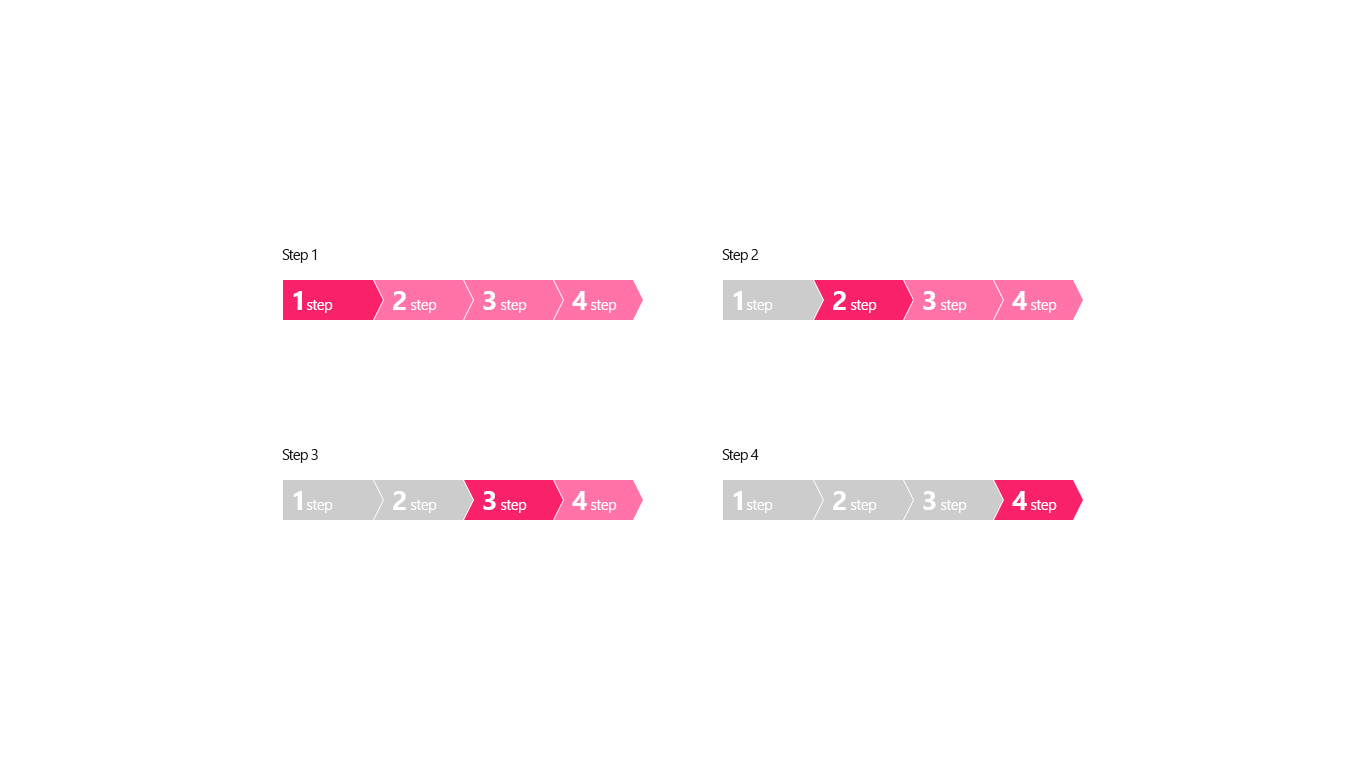
<style>
.page{position:relative;width:1366px;height:768px;background:#ffffff}
.page>*{position:absolute;margin:0}
.t1{font:14.7px "SegoeUI";letter-spacing:-0.05em;color:#191919}
.t2{font:26.7px "SegoeUI-Bold";letter-spacing:-0.025em;color:#ffffff}
.t3{font:14.7px "SegoeUI";letter-spacing:-0.025em;color:#ffffff}
</style>
<div class="page">
<p class="t1" style="left:282px;top:249px;width:35px;height:14px">Step 1</p>
<p class="t1" style="left:722px;top:249px;width:37px;height:14px">Step 2</p>
<p class="t2" style="left:293px;top:291px;width:9px;height:19px">1</p>
<p class="t2" style="left:393px;top:291px;width:13px;height:19px">2</p>
<p class="t2" style="left:483px;top:291px;width:13px;height:19px">3</p>
<p class="t2" style="left:572px;top:291px;width:15px;height:19px">4</p>
<p class="t2" style="left:733px;top:291px;width:9px;height:19px">1</p>
<p class="t2" style="left:833px;top:291px;width:13px;height:19px">2</p>
<p class="t2" style="left:923px;top:291px;width:13px;height:19px">3</p>
<p class="t2" style="left:1012px;top:291px;width:15px;height:19px">4</p>
<p class="t3" style="left:307px;top:300px;width:26px;height:13px">step</p>
<p class="t3" style="left:411px;top:300px;width:26px;height:13px">step</p>
<p class="t3" style="left:501px;top:300px;width:26px;height:13px">step</p>
<p class="t3" style="left:591px;top:300px;width:26px;height:13px">step</p>
<p class="t3" style="left:747px;top:300px;width:26px;height:13px">step</p>
<p class="t3" style="left:851px;top:300px;width:26px;height:13px">step</p>
<p class="t3" style="left:941px;top:300px;width:26px;height:13px">step</p>
<p class="t3" style="left:1031px;top:300px;width:26px;height:13px">step</p>
<p class="t1" style="left:282px;top:449px;width:36px;height:14px">Step 3</p>
<p class="t1" style="left:722px;top:449px;width:37px;height:14px">Step 4</p>
<p class="t2" style="left:293px;top:491px;width:9px;height:19px">1</p>
<p class="t2" style="left:393px;top:491px;width:13px;height:19px">2</p>
<p class="t2" style="left:483px;top:491px;width:13px;height:19px">3</p>
<p class="t2" style="left:572px;top:491px;width:15px;height:19px">4</p>
<p class="t2" style="left:733px;top:491px;width:9px;height:19px">1</p>
<p class="t2" style="left:833px;top:491px;width:13px;height:19px">2</p>
<p class="t2" style="left:923px;top:491px;width:13px;height:19px">3</p>
<p class="t2" style="left:1012px;top:491px;width:15px;height:19px">4</p>
<p class="t3" style="left:307px;top:500px;width:26px;height:13px">step</p>
<p class="t3" style="left:411px;top:500px;width:26px;height:13px">step</p>
<p class="t3" style="left:501px;top:500px;width:26px;height:13px">step</p>
<p class="t3" style="left:591px;top:500px;width:26px;height:13px">step</p>
<p class="t3" style="left:747px;top:500px;width:26px;height:13px">step</p>
<p class="t3" style="left:851px;top:500px;width:26px;height:13px">step</p>
<p class="t3" style="left:941px;top:500px;width:26px;height:13px">step</p>
<p class="t3" style="left:1031px;top:500px;width:26px;height:13px">step</p>
</div>
